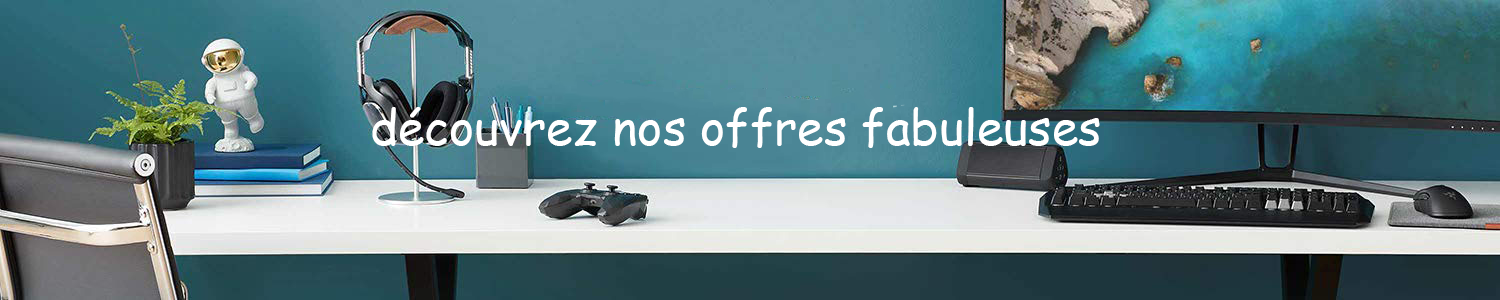
<style>
.page{position:relative;width:1500px;height:300px}
.page>*{position:absolute;margin:0}
.t1{font:48px "ComicSansMS";color:#ffffff}
</style>
<div class="page">
<p class="t1" style="left:372px;top:107px;width:728px;height:41px">découvrez nos offres fabuleuses</p>
</div>
